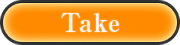
<style>
.page{position:relative;width:180px;height:45px;background:#ff8a00}
.page>*{position:absolute;margin:0}
.t1{font:25px "RyuminPro-ExBold";color:#fff6f3}
</style>
<div class="page">
<p class="t1" style="left:61px;top:13px;width:58px;height:19px">Take</p>
</div>
